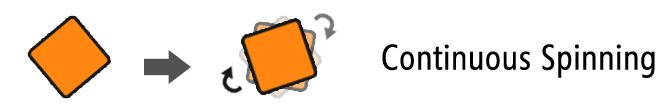
<style>
.page{position:relative;width:660px;height:112px;background:#ffffff}
.page>*{position:absolute;margin:0}
.t1{font:35px "SegoeCondensed";color:#000000;font-weight:bold}
</style>
<div class="page">
<p class="t1" style="left:382px;top:44px;width:273px;height:34px">Continuous Spinning</p>
</div>
